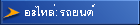
<style>
.page{position:relative;width:140px;height:25px}
.page>*{position:absolute;margin:0}
.t1{font:15.3px "EucrosiaDSE";color:#ffffff;scale:1.12 1}
</style>
<div class="page">
<p class="t1" style="left:25px;top:4px;width:70px;height:12px">ÍÐäËÅè:Ã¶Â¹µì</p>
</div>
